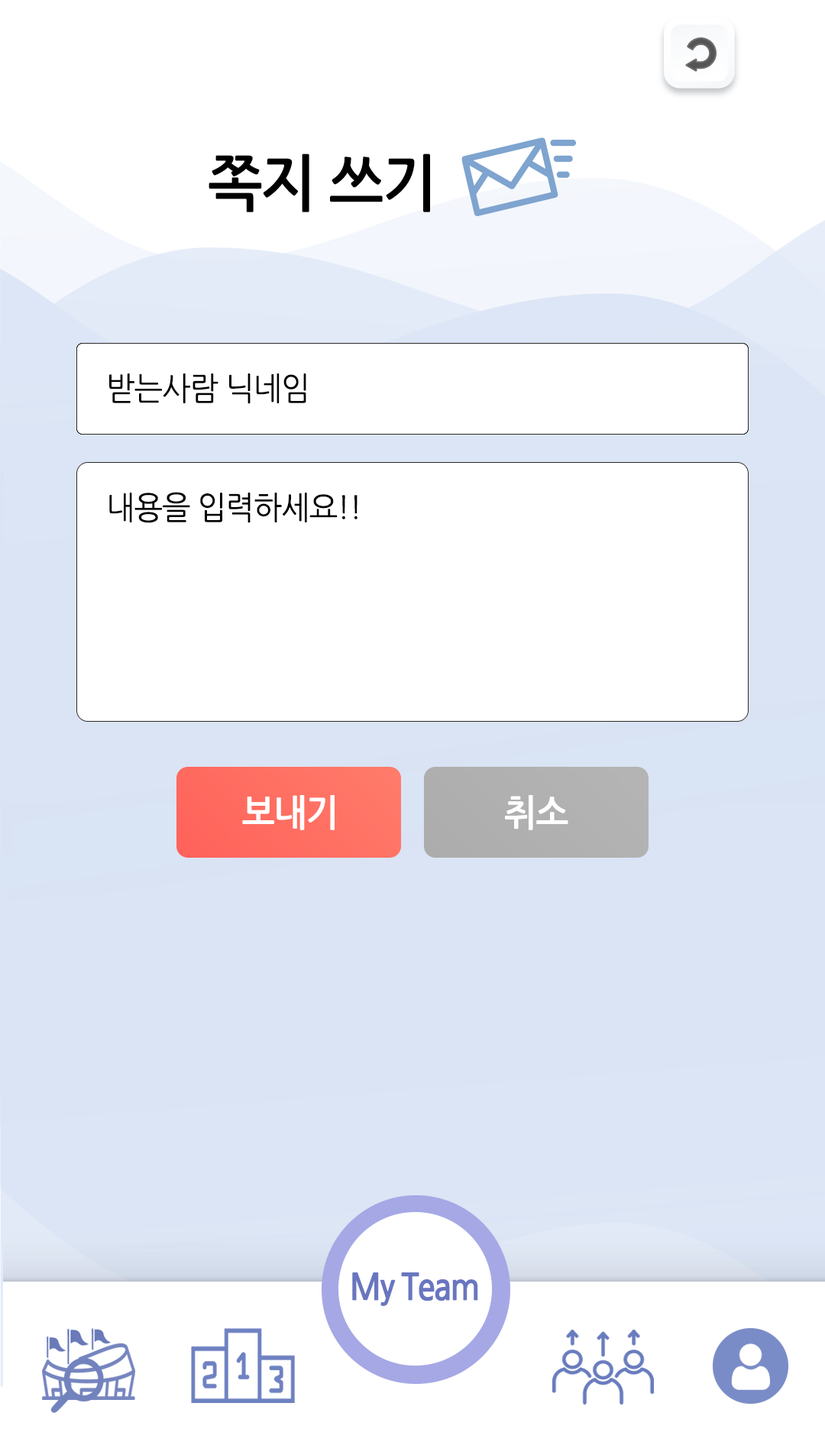
<style>
.page{position:relative;width:825px;height:1445px;background:#ffffff}
.page>*{position:absolute;margin:0}
.t1{font:61.1px "NanumGothicBold";letter-spacing:-0.025em;color:#000000;scale:0.95 1}
.t2{font:32.1px "NanumGothic";letter-spacing:-0.025em;color:#000000;scale:0.95 1}
.t3{font:36.7px "NanumGothicBold";letter-spacing:-0.025em;color:#ffffff;scale:0.95 1}
</style>
<div class="page">
<p class="t1" style="left:209px;top:154px;width:221px;height:58px">쪽지 쓰기</p>
<p class="t2" style="left:109px;top:374px;width:197px;height:30px">받는사람 닉네임</p>
<p class="t2" style="left:109px;top:492px;width:249px;height:31px">내용을 입력하세요!!</p>
<p class="t3" style="left:242px;top:795px;width:93px;height:35px">보내기</p>
<p class="t3" style="left:505px;top:795px;width:63px;height:35px">취소</p>
</div>
